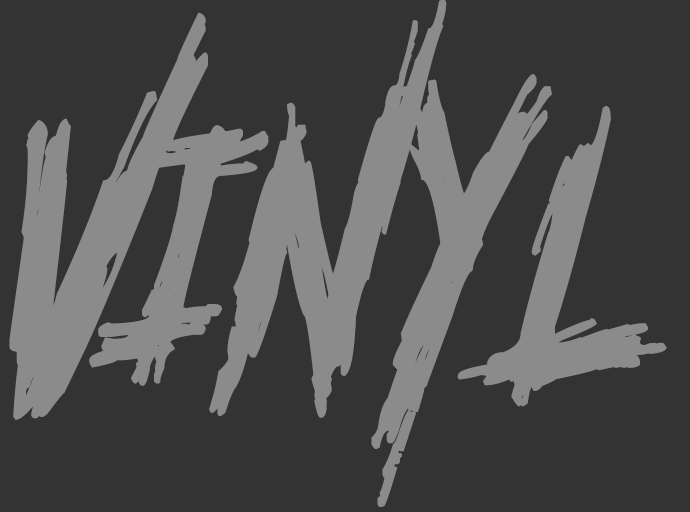
<style>
.page{position:relative;width:690px;height:512px;background:#333333}
.page>*{position:absolute;margin:0}
.t1{font:516.4px "AnotherAmerica";color:#8b8b8b;font-weight:bold;scale:0.87 1}
</style>
<div class="page">
<p class="t1" style="left:9px;top:0px;width:658px;height:507px">Vinyl</p>
</div>
